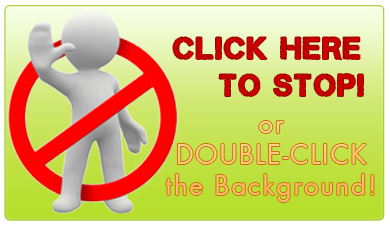
<style>
.page{position:relative;width:390px;height:225px}
.page>*{position:absolute;margin:0}
.t1{font:30.8px "Captureit";letter-spacing:0.08em;color:#cc0000}
.t2{font:25.6px "FuturaLT-Book";letter-spacing:0.08em;color:#faca7f}
</style>
<div class="page">
<p class="t1" style="left:173px;top:37px;width:190px;height:59px">CLICK HERE<br>  to stop!</p>
<p class="t2" style="left:166px;top:121px;width:208px;height:81px;text-align:center">or<br>DOUBLE-CLICK<br>the Background!</p>
</div>
